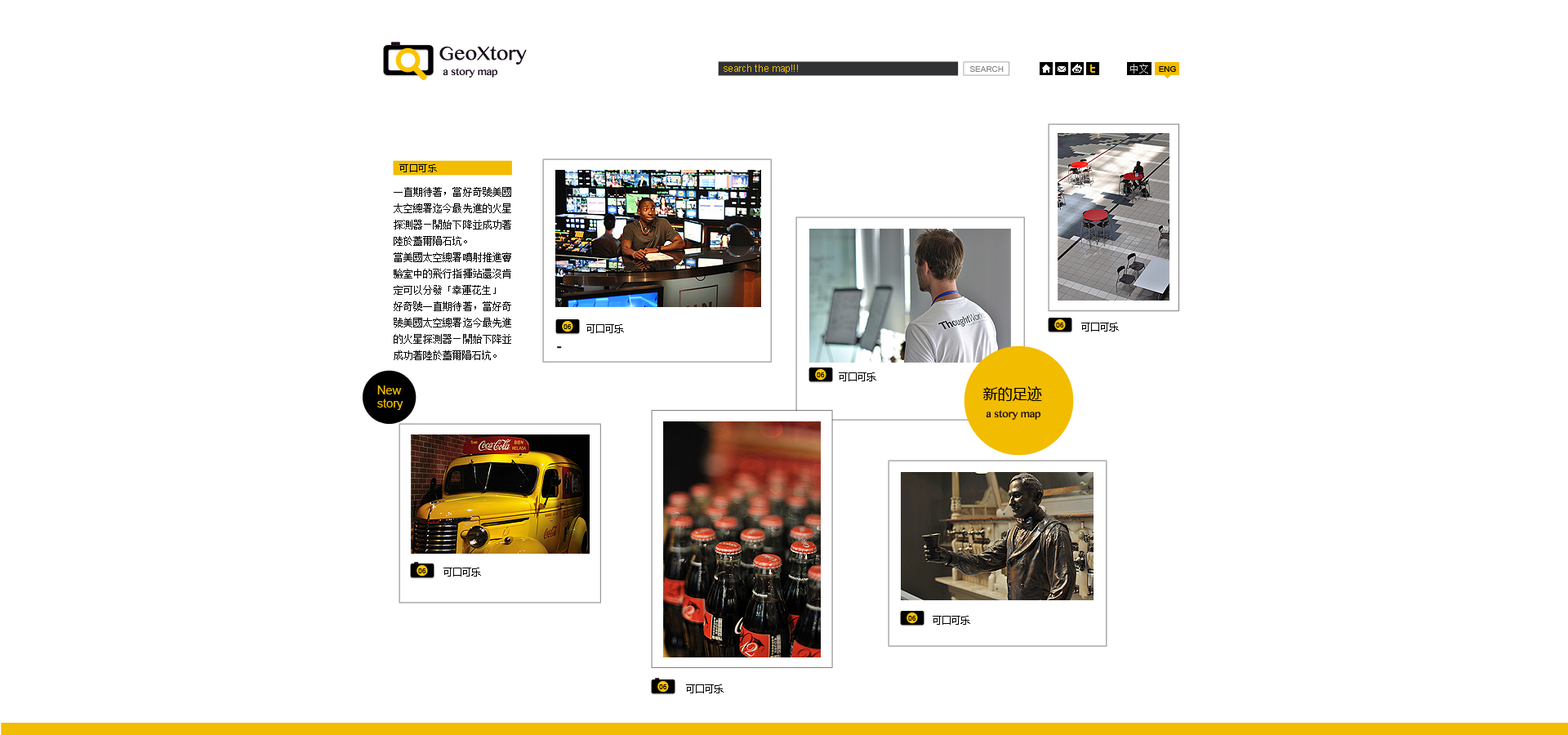
<style>
.page{position:relative;width:1568px;height:735px;background:#ffffff}
.page>*{position:absolute;margin:0}
.t1{font:27px "SinhalaMN";color:#190d1c}
.t2{font:9.8px "ArialMT";color:#f2bc00}
.t3{font:9.8px "SimSun";color:#d0d0d0}
.t4{font:14.1px "SinhalaMN";color:#190d1c}
.t5{font:8.1px "ArialMT";color:#8c868d;text-transform:uppercase}
.t6{font:8.2px "ArialMT";color:#000000}
.t7{font:9px "MicrosoftYaHei";color:#000000}
.t8{font:9.8px/16.3px "SimSun";color:#000000}
.t9{font:6.8px "ArialMT";color:#000000}
.t10{font:9.8px "MicrosoftYaHei";color:#000000}
.t11{font:11.9px/13.2px "ArialMT";color:#f2bc00}
.t12{font:14.7px "MicrosoftYaHei";color:#000000}
</style>
<div class="page">
<p class="t1" style="left:439px;top:46px;width:88px;height:19px">GeoXtory</p>
<p class="t2" style="left:724px;top:65px;width:74px;height:9px">search the map!!!</p>
<p class="t3" style="left:1130px;top:64px;width:18px;height:10px">中文</p>
<p class="t4" style="left:443px;top:68px;width:54px;height:10px">a story map</p>
<p class="t5" style="left:969px;top:66px;width:35px;height:6px">Search</p>
<p class="t6" style="left:1159px;top:66px;width:17px;height:6px">ENG</p>
<p class="t7" style="left:399px;top:164px;width:38px;height:8px">可口可乐</p>
<p class="t8" style="left:394px;top:187px;width:117px;height:173px;text-align:justify">一直期待著，當好奇號美國太空總署迄今最先進的火星探測器—開始下降並成功著陸於蓋爾隕石坑。 <br>當美國太空總署噴射推進實驗室中的飛行指揮站還沒肯定可以分發「幸運花生」<br>好奇號一直期待著，當好奇號美國太空總署迄今最先進的火星探測器—開始下降並成功著陸於蓋爾隕石坑。</p>
<p class="t9" style="left:564px;top:324px;width:8px;height:5px">06</p>
<p class="t10" style="left:586px;top:324px;width:38px;height:9px">可口可乐</p>
<p class="t9" style="left:1056px;top:323px;width:8px;height:4px">06</p>
<p class="t10" style="left:1081px;top:323px;width:38px;height:9px">可口可乐</p>
<p class="t9" style="left:817px;top:372px;width:8px;height:5px">06</p>
<p class="t10" style="left:839px;top:372px;width:37px;height:9px">可口可乐</p>
<p class="t11" style="left:377px;top:385px;width:26px;height:25px">New <br>story</p>
<p class="t12" style="left:983px;top:386px;width:59px;height:15px">新的足迹</p>
<p class="t4" style="left:986px;top:410px;width:54px;height:10px">a story map</p>
<p class="t9" style="left:418px;top:568px;width:8px;height:5px">06</p>
<p class="t10" style="left:443px;top:568px;width:38px;height:9px">可口可乐</p>
<p class="t9" style="left:908px;top:616px;width:8px;height:5px">06</p>
<p class="t10" style="left:933px;top:616px;width:37px;height:9px">可口可乐</p>
<p class="t9" style="left:659px;top:684px;width:8px;height:5px">06</p>
<p class="t10" style="left:686px;top:684px;width:38px;height:9px">可口可乐</p>
</div>
